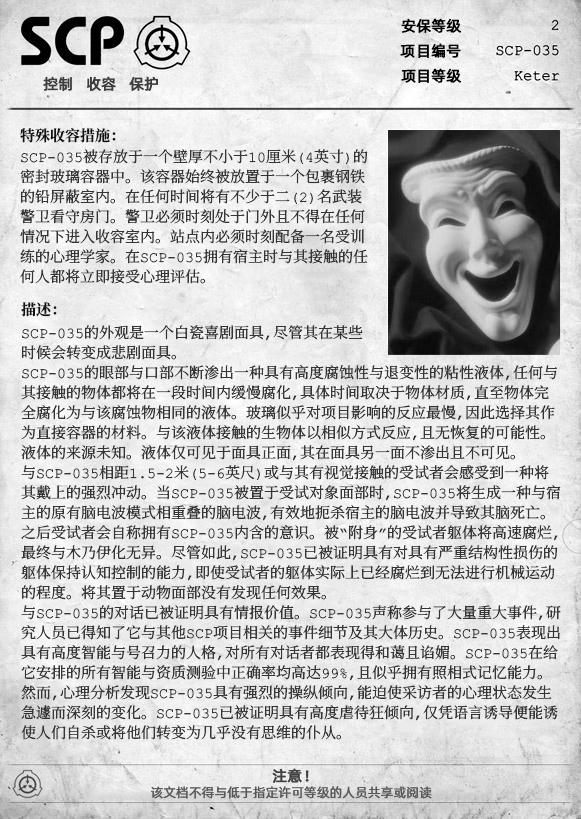
<style>
.page{position:relative;width:581px;height:819px}
.page>*{position:absolute;margin:0}
.t1{font:15px "AlibabaPuHuiTiR";color:#000000;font-weight:bold}
.t2{font:15px "AlibabaPuHuiTiR";color:#3d3d3d;font-weight:bold}
.t3{font:15px "ContainmentBreach-Bold";color:#121212}
.t4{font:15px/20px "ContainmentBreach-Regular";color:#353535}
.t5{font:15px "AlibabaPuHuiTiR";color:#414141;font-weight:bold}
.t6{font:13px "AlibabaPuHuiTiR";color:#575757}
</style>
<div class="page">
<p class="t1" style="left:401px;top:18px;width:61px;height:15px">安保等级</p>
<p class="t1" style="left:400px;top:43px;width:61px;height:15px">项目编号</p>
<p class="t2" style="left:43px;top:76px;width:115px;height:15px">控制   收容   保护</p>
<p class="t1" style="left:401px;top:68px;width:61px;height:15px">项目等级</p>
<p class="t3" style="left:20px;top:128px;width:96px;height:15px">特殊收容措施：</p>
<p class="t4" style="left:20px;top:149px;width:348px;height:135px">SCP-035被存放于一个壁厚不小于10厘米（4英寸）的<br>密封玻璃容器中。该容器始终被放置于一个包裹钢铁<br>的铅屏蔽室内。在任何时间将有不少于二（2）名武装<br>警卫看守房门。警卫必须时刻处于门外且不得在任何<br>情况下进入收容室内。站点内必须时刻配备一名受训<br>练的心理学家。在SCP-035拥有宿主时与其接触的任<br>何人都将立即接受心理评估。</p>
<p class="t3" style="left:21px;top:302px;width:36px;height:15px">描述：</p>
<p class="t4" style="left:21px;top:325px;width:540px;height:415px">SCP-035的外观是一个白瓷喜剧面具，尽管其在某些<br>时候会转变成悲剧面具。<br>SCP-035的眼部与口部不断渗出一种具有高度腐蚀性与退变性的粘性液体，任何与<br>其接触的物体都将在一段时间内缓慢腐化，具体时间取决于物体材质，直至物体完<br>全腐化为与该腐蚀物相同的液体。玻璃似乎对项目影响的反应最慢，因此选择其作<br>为直接容器的材料。与该液体接触的生物体以相似方式反应，且无恢复的可能性。<br>液体的来源未知。液体仅可见于面具正面，其在面具另一面不渗出且不可见。<br>与SCP-035相距1.5-2米（5-6英尺）或与其有视觉接触的受试者会感受到一种将<br>其戴上的强烈冲动。当SCP-035被置于受试对象面部时，SCP-035将生成一种与宿<br>主的原有脑电波模式相重叠的脑电波，有效地扼杀宿主的脑电波并导致其脑死亡。<br>之后受试者会自称拥有SCP-035内含的意识。被“附身”的受试者躯体将高速腐烂，<br>最终与木乃伊化无异。尽管如此，SCP-035已被证明具有对具有严重结构性损伤的<br>躯体保持认知控制的能力，即使受试者的躯体实际上已经腐烂到无法进行机械运动<br>的程度。将其置于动物面部没有发现任何效果。<br>与SCP-035的对话已被证明具有情报价值。SCP-035声称参与了大量重大事件，研<br>究人员已得知了它与其他SCP项目相关的事件细节及其大体历史。SCP-035表现出<br>具有高度智能与号召力的人格，对所有对话者都表现得和蔼且谄媚。SCP-035在给<br>它安排的所有智能与资质测验中正确率均高达99%，且似乎拥有照相式记忆能力。<br>然而，心理分析发现SCP-035具有强烈的操纵倾向，能迫使采访者的心理状态发生<br>急遽而深刻的变化。SCP-035已被证明具有高度虐待狂倾向，仅凭语言诱导便能诱<br>使人们自杀或将他们转变为几乎没有思维的仆从。</p>
<p class="t5" style="left:272px;top:768px;width:37px;height:15px">注意！</p>
<p class="t6" style="left:151px;top:786px;width:281px;height:13px">该文档不得与低于指定许可等级的人员共享或阅读</p>
</div>
